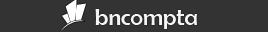
<style>
.page{position:relative;width:268px;height:32px;background:#333333}
.page>*{position:absolute;margin:0}
.t1{font:24px "BerlinSansFB-Reg";color:#ffffff}
</style>
<div class="page">
<p class="t1" style="left:95px;top:9px;width:102px;height:20px">bncompta</p>
</div>
